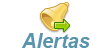
<style>
.page{position:relative;width:110px;height:50px;background:#ffffff}
.page>*{position:absolute;margin:0}
.t1{font:20px "Arial-BoldItalicMT";color:#5894ae}
</style>
<div class="page">
<p class="t1" style="left:21px;top:33px;width:69px;height:15px">Alertas</p>
</div>
